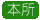
<style>
.page{position:relative;width:40px;height:20px;background:#228611}
.page>*{position:absolute;margin:0}
.t1{font:14px "YouYuan"}
</style>
<div class="page">
<p class="t1" style="left:7px;top:2px;width:28px;height:14px">本所</p>
</div>
